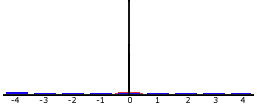
<style>
.page{position:relative;width:257px;height:105px;background:#ffffff}
.page>*{position:absolute;margin:0}
.t1{font:8px "Verdana";color:#030303}
</style>
<div class="page">
<p class="t1" style="left:11px;top:97px;width:234px;height:6px">-4       -3       -2       -1        0        1         2        3        4</p>
</div>
